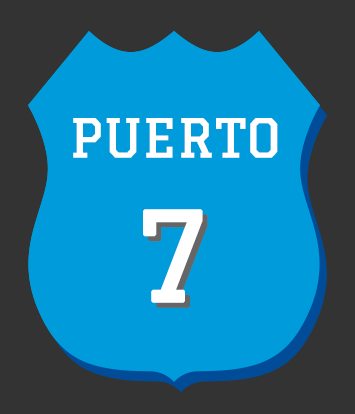
<style>
.page{position:relative;width:355px;height:414px;background:#009bdb}
.page>*{position:absolute;margin:0}
.t1{font:52px "Graduate-Regular";color:#ffffff;font-weight:bold}
.t2{font:120px "Graduate-Regular";color:#ffffff;font-weight:bold}
.t3{font:120px "Graduate-Regular";font-weight:bold}
.t4{font:52px "Graduate-Regular";font-weight:bold}
</style>
<div class="page">
<p class="t1" style="left:73px;top:118px;width:205px;height:185px;text-align:center">PUERTO<br><span class="t2">7</span></p>
<p class="t3" style="left:148px;top:214px;width:60px;height:94px"><span class="t4"><br></span>7</p>
</div>
